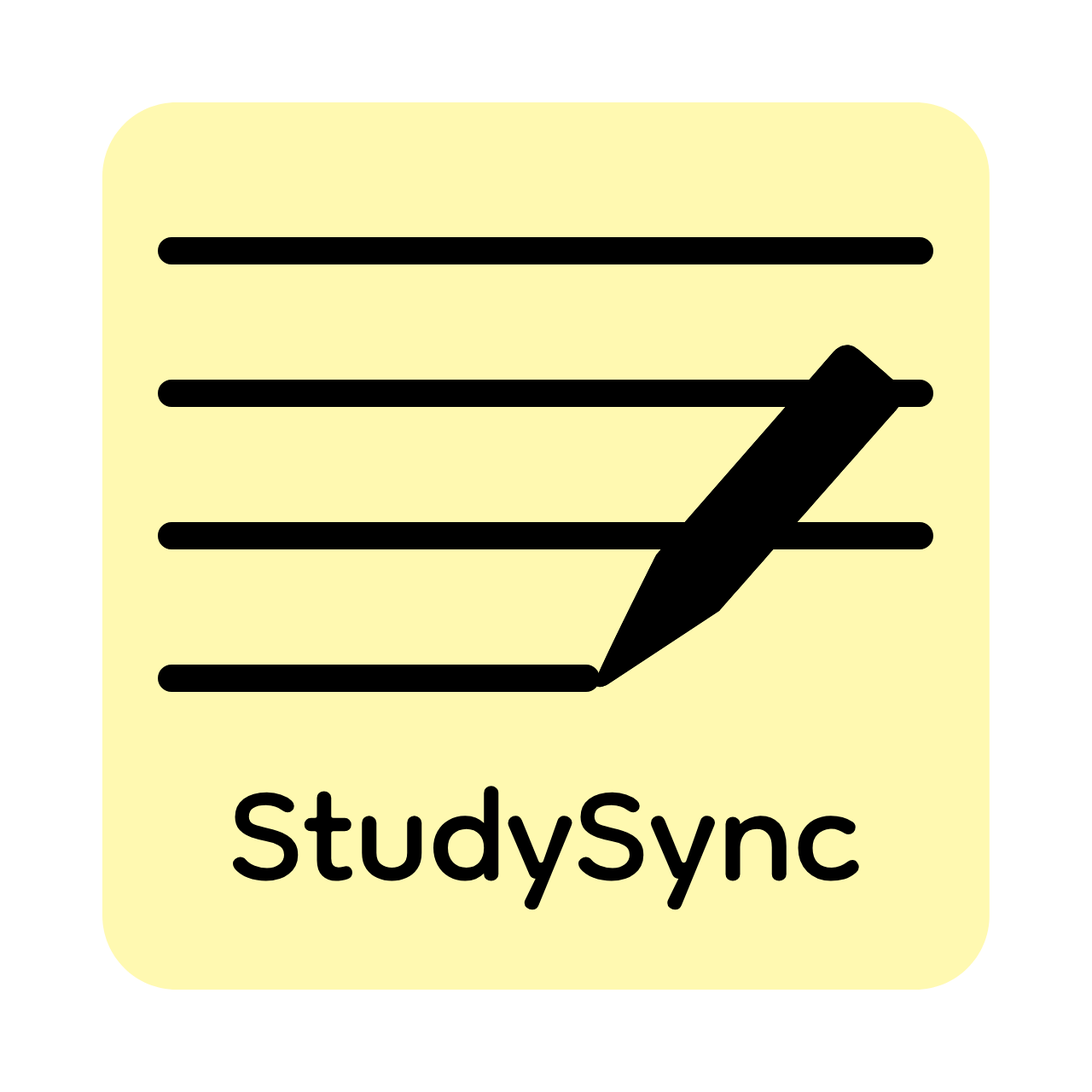
<style>
.page{position:relative;width:1092px;height:1092px;background:#fff9b1}
.page>*{position:absolute;margin:0}
.t1{font:213.3px "Dongle-Regular";color:#000000}
</style>
<div class="page">
<p class="t1" style="left:233px;top:786px;width:626px;height:124px">StudySync</p>
</div>
